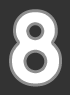
<style>
.page{position:relative;width:70px;height:95px;background:#333333}
.page>*{position:absolute;margin:0}
.t1{font:110px "Bauhaus93";letter-spacing:0.2em;color:#ffffff}
</style>
<div class="page">
<p class="t1" style="left:9px;top:9px;width:53px;height:78px">8</p>
</div>
